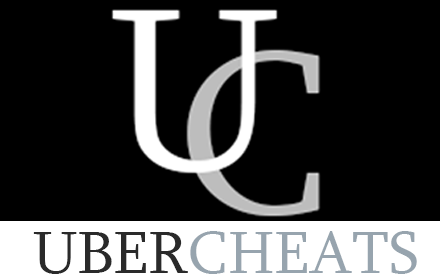
<style>
.page{position:relative;width:440px;height:280px;background:#000000}
.page>*{position:absolute;margin:0}
.t1{font:60.5px "Sylfaen";color:#2a2a2a}
.t2{font:60.5px "Sylfaen";color:#97a4ae}
</style>
<div class="page">
<p class="t1" style="left:33px;top:232px;width:155px;height:42px">UBER</p>
<p class="t2" style="left:190px;top:231px;width:227px;height:43px">CHEATS</p>
</div>
